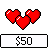
<style>
.page{position:relative;width:48px;height:48px;background:#ffffff}
.page>*{position:absolute;margin:0}
.t1{font:12px "Calibri";color:#000000}
</style>
<div class="page">
<p class="t1" style="left:16px;top:36px;width:16px;height:10px">$50</p>
</div>
